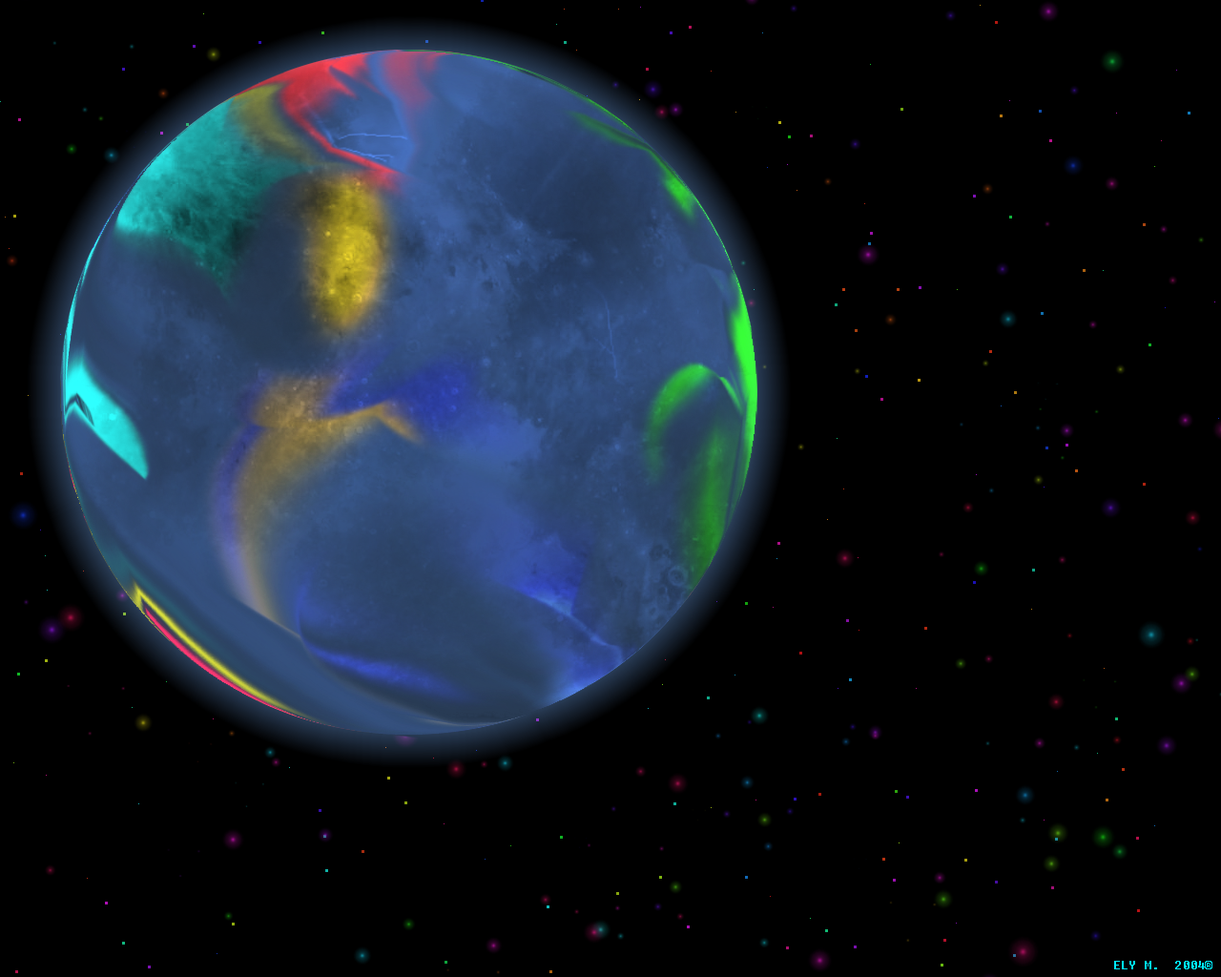
<style>
.page{position:relative;width:1221px;height:977px;background:#000000}
.page>*{position:absolute;margin:0}
.t1{font:11.4px "Fixedsys";color:#00eaff}
</style>
<div class="page">
<p class="t1" style="left:1114px;top:960px;width:98px;height:9px">ELY M.  2004®</p>
</div>
